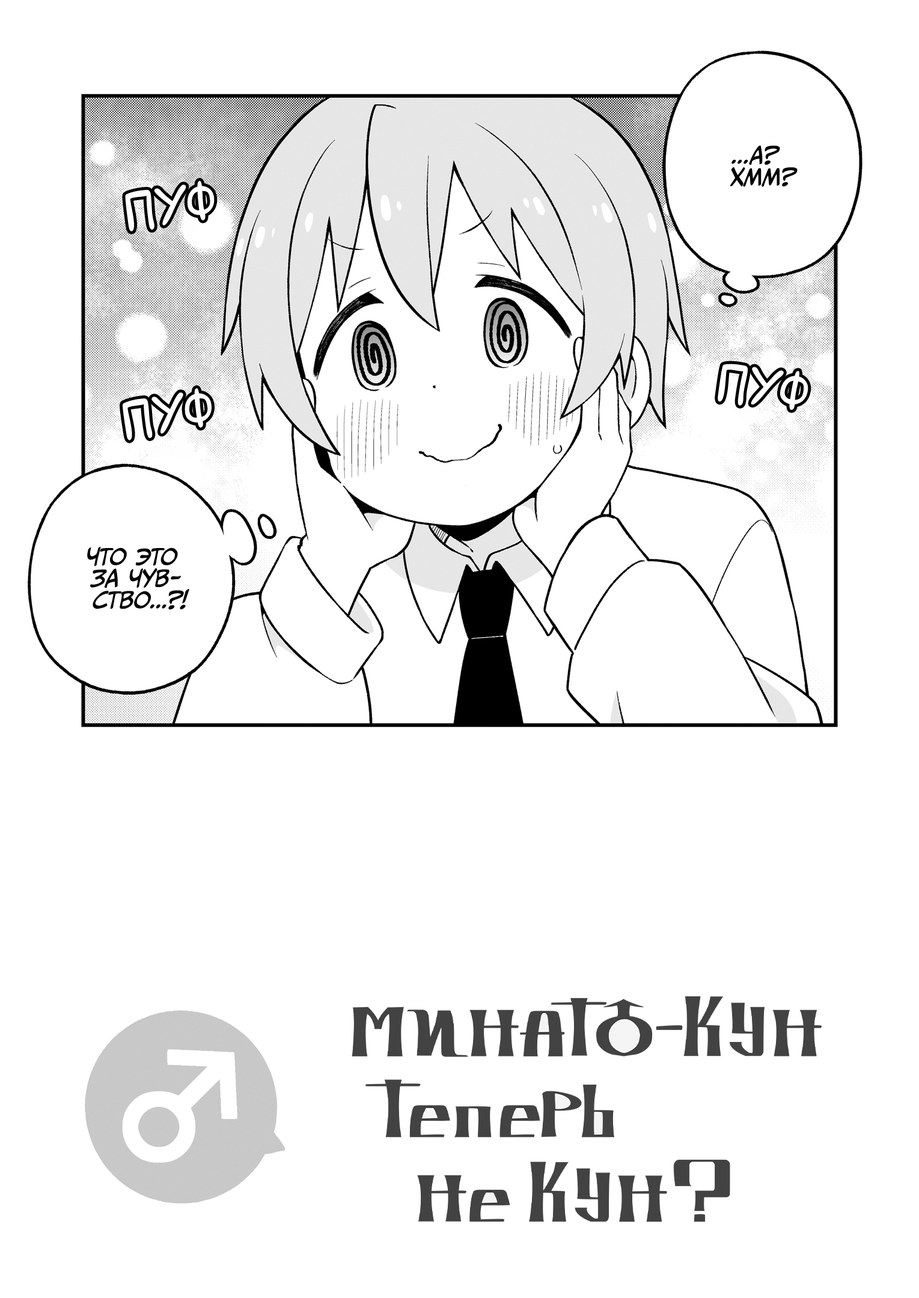
<style>
.page{position:relative;width:919px;height:1298px;background:#ffffff}
.page>*{position:absolute;margin:0}
.t1{font:21.6px "CCMeanwhile";color:#000000;text-transform:uppercase;font-style:italic}
.t2{font:54.1px "laCartoonerie";color:#ffffff;text-transform:uppercase}
</style>
<div class="page">
<p class="t1" style="left:729px;top:145px;width:68px;height:42px;text-align:center">...А?<br>Хмм?</p>
<p class="t2" style="left:125px;top:181px;width:90px;height:50px;rotate:-8deg">пуф</p>
<p class="t2" style="left:717px;top:364px;width:91px;height:46px;rotate:7deg">пуф</p>
<p class="t2" style="left:123px;top:388px;width:89px;height:52px;rotate:-9deg">пуф</p>
<p class="t1" style="left:87px;top:547px;width:102px;height:63px;text-align:center">Что это<br>за чув-<br>ство...?!</p>
</div>
